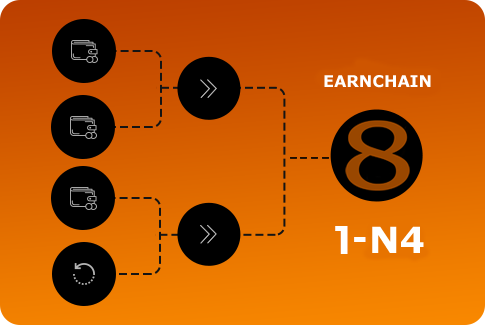
<style>
.page{position:relative;width:485px;height:325px}
.page>*{position:absolute;margin:0}
.t1{font:16px "Verdana-Bold";color:#ffffff}
.t2{font:36px "Verdana-Bold";color:#ffffff}
</style>
<div class="page">
<p class="t1" style="left:324px;top:75px;width:107px;height:13px">EARNCHAIN</p>
<p class="t2" style="left:372px;top:226px;width:52px;height:27px">N4</p>
</div>
